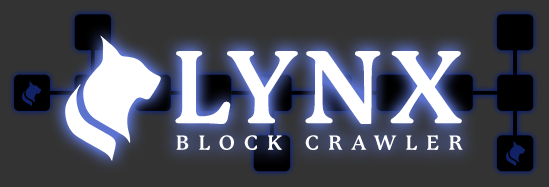
<style>
.page{position:relative;width:549px;height:187px;background:#333333}
.page>*{position:absolute;margin:0}
.t1{font:100.8px "P22MackinacPro-Bold";letter-spacing:0.05em;color:#ffffff}
.t2{font:20.1px "P22MackinacPro-Bold";letter-spacing:0.45em;color:#ffffff}
</style>
<div class="page">
<p class="t1" style="left:175px;top:51px;width:287px;height:73px">LYNX</p>
<p class="t2" style="left:176px;top:135px;width:287px;height:15px">BLOCK CRAWLER</p>
</div>
